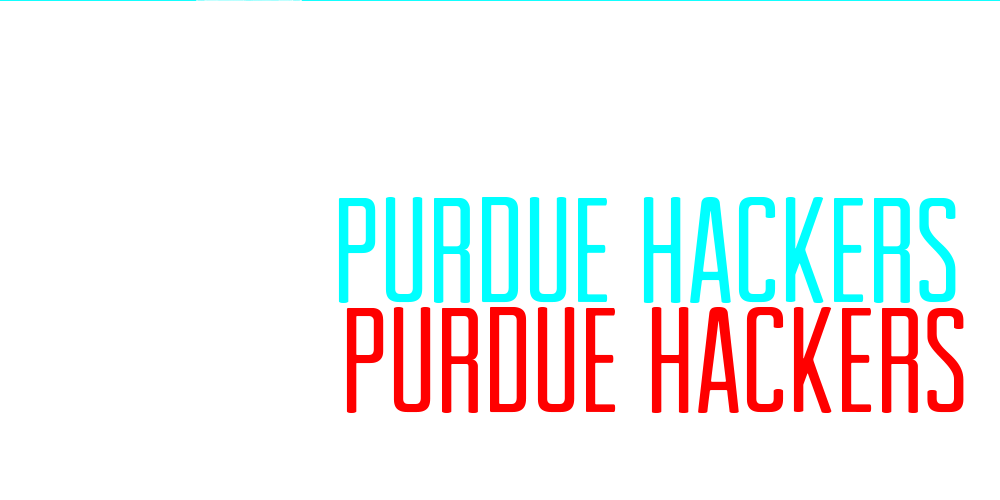
<style>
.page{position:relative;width:1000px;height:500px;background:#ffffff}
.page>*{position:absolute;margin:0}
.t1{font:150px "ArvilSans";color:#00ffff}
</style>
<div class="page">
<p class="t1" style="left:338px;top:196px;width:618px;height:106px">PURDUE HACKERS</p>
</div>
